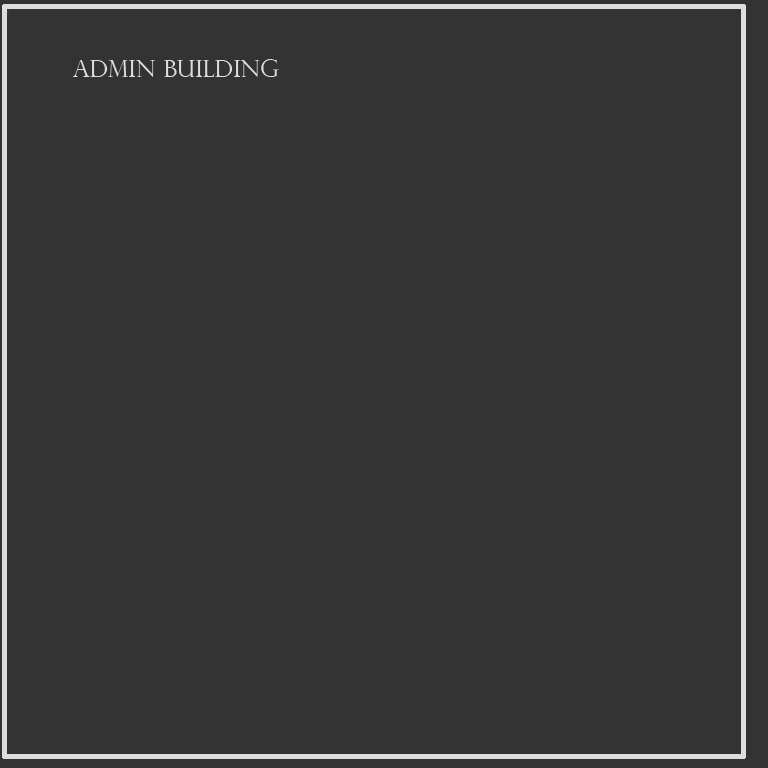
<style>
.page{position:relative;width:768px;height:768px;background:#333333}
.page>*{position:absolute;margin:0}
.t1{font:24px "PerpetuaTitlingMT-Light";color:#dedede}
</style>
<div class="page">
<p class="t1" style="left:73px;top:59px;width:206px;height:18px">Admin Building</p>
</div>
